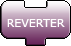
<style>
.page{position:relative;width:71px;height:46px;background:#ffffff}
.page>*{position:absolute;margin:0}
.t1{font:11px "Verdana";color:#ffffff}
</style>
<div class="page">
<p class="t1" style="left:7px;top:19px;width:58px;height:8px">REVERTER</p>
</div>
